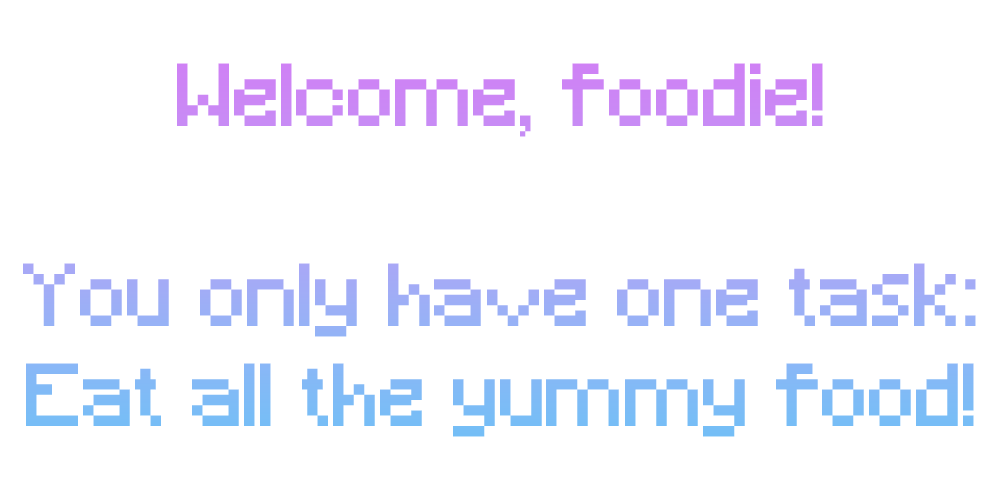
<style>
.page{position:relative;width:1000px;height:500px;background:#ffffff}
.page>*{position:absolute;margin:0}
.t1{font:83.3px "Minecraft"}
</style>
<div class="page">
<p class="t1" style="left:23px;top:63px;width:953px;height:374px;text-align:center">Welcome, foodie!<br><br>You only have one task:<br>Eat all the yummy food!</p>
</div>
